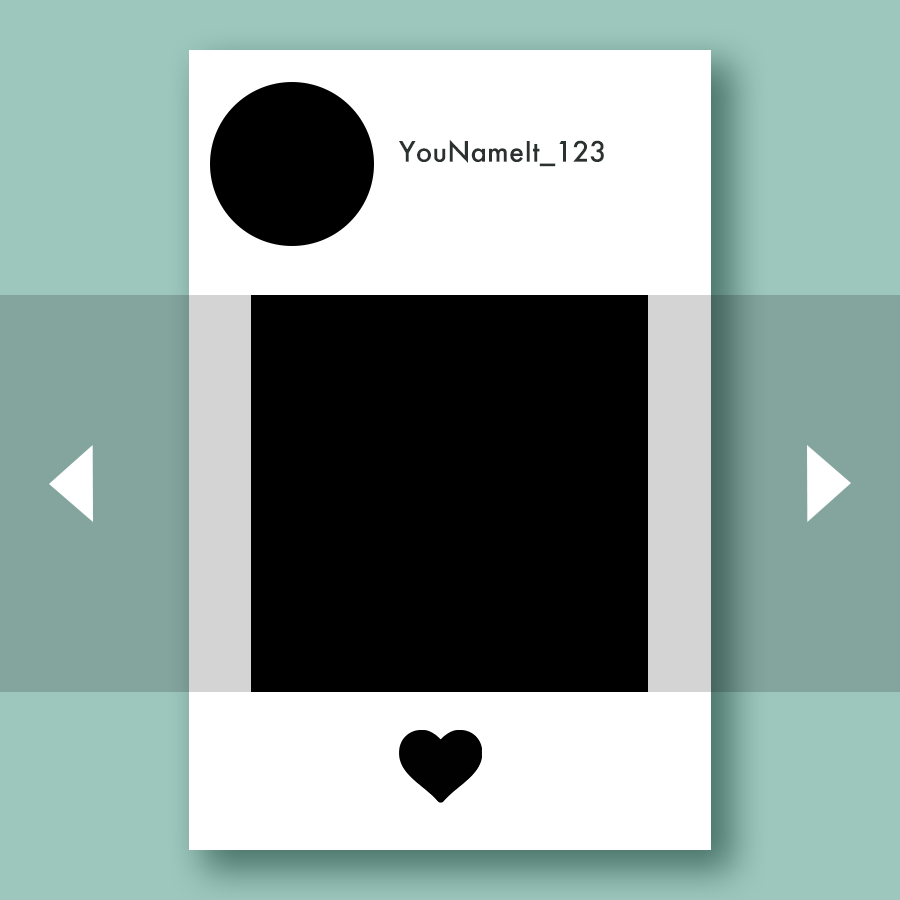
<style>
.page{position:relative;width:900px;height:900px;background:#ffffff}
.page>*{position:absolute;margin:0}
.t1{font:27.6px "Futura-Medium";color:#2b3130}
</style>
<div class="page">
<p class="t1" style="left:399px;top:139px;width:205px;height:28px">YouNameIt_123</p>
</div>
